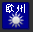
<style>
.page{position:relative;width:33px;height:32px;background:#000090}
.page>*{position:absolute;margin:0}
.t1{font:10.4px "SimSun";color:#ffffff}
</style>
<div class="page">
<p class="t1" style="left:6px;top:4px;width:19px;height:9px">欧州</p>
</div>
